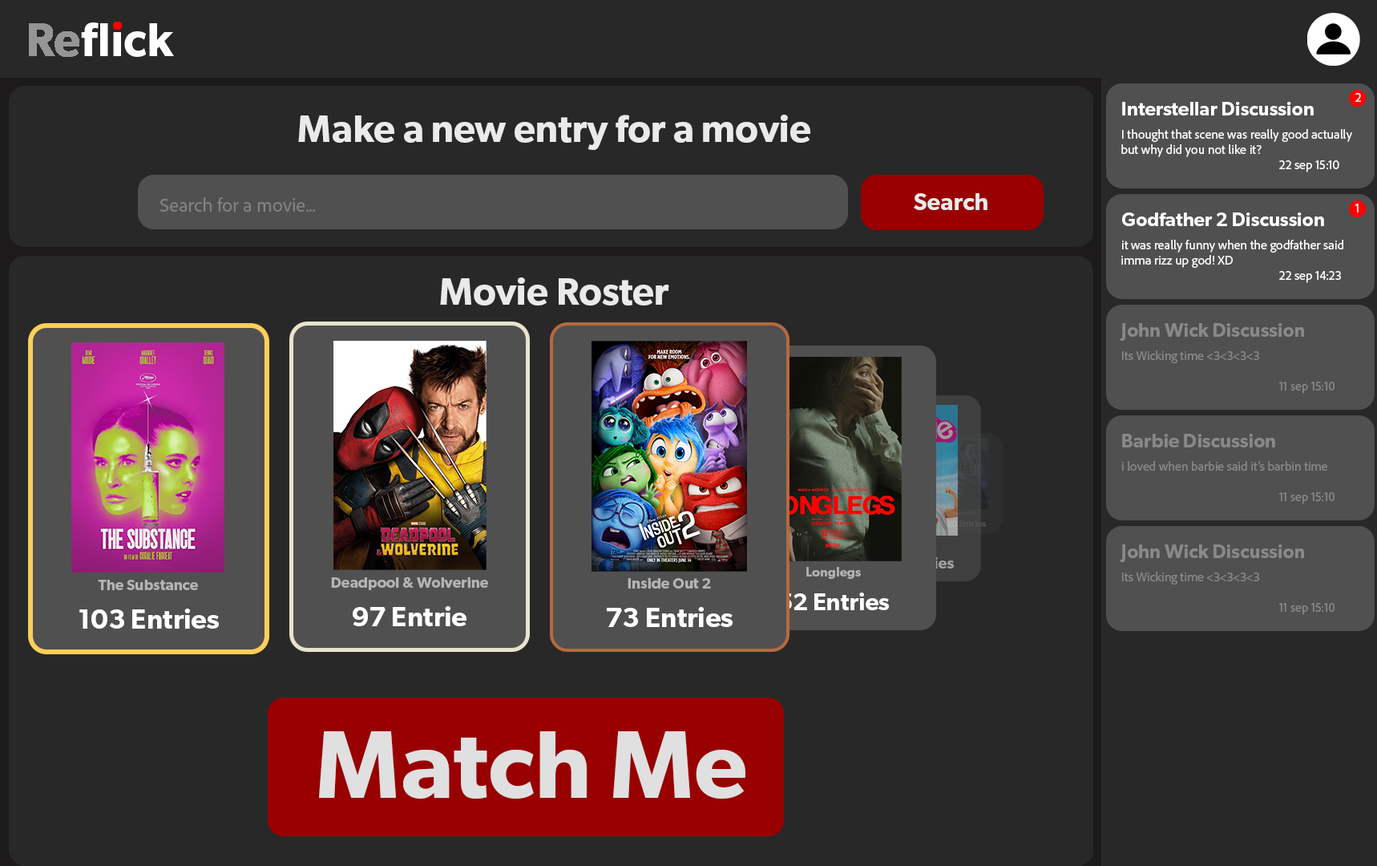
<style>
.page{position:relative;width:1377px;height:866px;background:#282828}
.page>*{position:absolute;margin:0}
.t1{font:12.8px "AdobeClean-Regular";color:#ffffff}
.t2{font:12.8px "Gibson-SemiBold";color:#959595}
.t3{font:19.2px "Gibson-SemiBold";color:#ffffff}
.t4{font:38.5px "Gibson-SemiBold";color:#eaeaea}
.t5{font:19.2px "AdobeClean-Regular";color:#828282}
.t6{font:19.2px "AdobeClean-Regular";color:#ff0000}
.t7{font:24px "Gibson-SemiBold";color:#eaeaea}
.t8{font:12.8px "AdobeClean-Regular";color:#898989}
.t9{font:19.2px "Gibson-SemiBold";color:#898989}
.t10{font:4.7px "Gibson-SemiBold";color:#494949}
.t11{font:13.2px "Gibson-SemiBold";color:#b4b4b4}
.t12{font:15.1px "Gibson-SemiBold";color:#b4b4b4}
.t13{font:24.3px "Gibson-SemiBold";color:#ffffff}
.t14{font:27.9px "Gibson-SemiBold";color:#ffffff}
.t15{font:96.2px "Gibson-SemiBold";color:#e0e0e0}
</style>
<div class="page">
<p class="t1" style="left:1122px;top:102px;width:230px;height:70px"><span class="t2"><br>      </span><span class="t3">Interstellar Discussion<br>    </span>I thought that scene was really good actually<br>     but why did you not like it? <br>           22 sep 15:10</p>
<p class="t1" style="left:1356px;top:93px;width:5px;height:9px">2</p>
<p class="t4" style="left:298px;top:115px;width:512px;height:35px">Make a new entry for a movie</p>
<p class="t5" style="left:160px;top:197px;width:155px;height:15px"><span class="t6"><br>     </span>Search for a movie...</p>
<p class="t7" style="left:914px;top:193px;width:74px;height:17px">Search</p>
<p class="t1" style="left:1356px;top:204px;width:3px;height:8px">1</p>
<p class="t1" style="left:1122px;top:212px;width:222px;height:71px"><span class="t2"><br>      </span><span class="t3">Godfather 2 Discussion<br>    </span>it was really funny when the godfather said <br>     imma rizz up god! XD <br>           22 sep 14:23</p>
<p class="t4" style="left:440px;top:277px;width:229px;height:28px">Movie Roster</p>
<p class="t8" style="left:1120px;top:323px;width:215px;height:71px"><span class="t2"><br>      </span><span class="t9">John Wick Discussion<br>    </span>Its Wicking time &lt;3&lt;3&lt;3&lt;3<br>           <br>      11 sep 15:10</p>
<p class="t8" style="left:1122px;top:434px;width:213px;height:70px"><span class="t2"><br>      </span><span class="t9">Barbie Discussion<br>    </span>i loved when barbie said it’s barbin time<br>           <br>      11 sep 15:10</p>
<p class="t10" style="left:955px;top:511px;width:22px;height:4px">John Wick</p>
<p class="t8" style="left:1120px;top:544px;width:215px;height:71px"><span class="t2"><br>      </span><span class="t9">John Wick Discussion<br>    </span>Its Wicking time &lt;3&lt;3&lt;3&lt;3<br>           <br>      11 sep 15:10</p>
<p class="t11" style="left:806px;top:567px;width:55px;height:12px">Longlegs</p>
<p class="t12" style="left:98px;top:580px;width:100px;height:10px">The Substance</p>
<p class="t12" style="left:331px;top:576px;width:157px;height:14px">Deadpool &amp; Wolverine</p>
<p class="t12" style="left:628px;top:577px;width:83px;height:11px">Inside Out 2</p>
<p class="t13" style="left:778px;top:592px;width:111px;height:18px">52 Entries</p>
<p class="t14" style="left:79px;top:608px;width:140px;height:21px">103 Entries</p>
<p class="t14" style="left:353px;top:606px;width:114px;height:20px">97 Entrie</p>
<p class="t14" style="left:607px;top:607px;width:126px;height:20px">73 Entries</p>
<p class="t15" style="left:319px;top:731px;width:427px;height:68px">Match Me</p>
</div>
